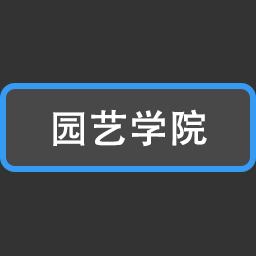
<style>
.page{position:relative;width:256px;height:256px;background:#333333}
.page>*{position:absolute;margin:0}
.t1{font:39px "AdobeHeitiStd-Regular";color:#ffffff;font-weight:bold}
</style>
<div class="page">
<p class="t1" style="left:53px;top:109px;width:154px;height:38px">园艺学院</p>
</div>
